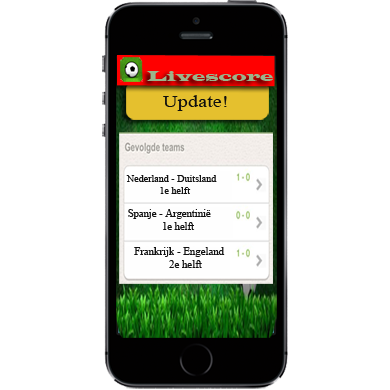
<style>
.page{position:relative;width:390px;height:390px;background:#ffffff}
.page>*{position:absolute;margin:0}
.t1{font:15px "LatinWide";color:#9bb48b}
.t2{font:17.3px "TimesNewRomanPSMT";color:#0f0f0f;scale:1.18 1}
.t3{font:10.1px "TimesNewRomanPSMT";color:#111111}
.t4{font:10.6px "TimesNewRomanPSMT";color:#111111}
.t5{font:10.8px "TimesNewRomanPSMT";color:#111111}
</style>
<div class="page">
<p class="t1" style="left:146px;top:71px;width:127px;height:11px">Livescore</p>
<p class="t2" style="left:163px;top:95px;width:64px;height:16px">Update!</p>
<p class="t3" style="left:126px;top:175px;width:91px;height:19px">Nederland - Duitsland<br> 1e helft</p>
<p class="t4" style="left:128px;top:209px;width:83px;height:21px">Spanje - Argentinië<br> 1e helft</p>
<p class="t5" style="left:134px;top:247px;width:91px;height:21px">Frankrijk - Engeland<br> 2e helft</p>
</div>
